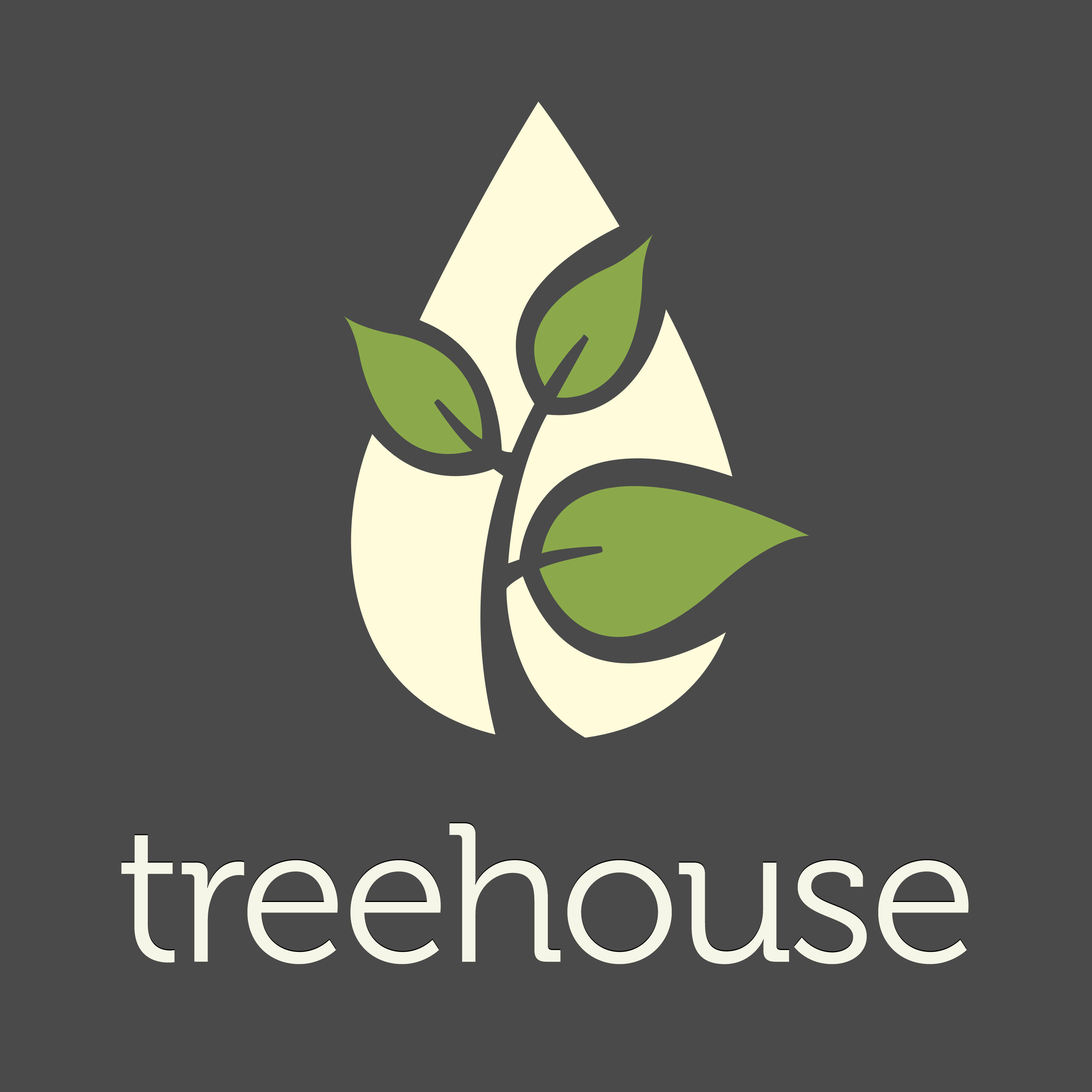
<style>
.page{position:relative;width:1092px;height:1092px;background:#4a4a4a}
.page>*{position:absolute;margin:0}
.t1{font:196.9px "Museo300-Regular";letter-spacing:-0.025em;color:#f6f6e8}
</style>
<div class="page">
<p class="t1" style="left:121px;top:823px;width:848px;height:141px">treehouse</p>
</div>
